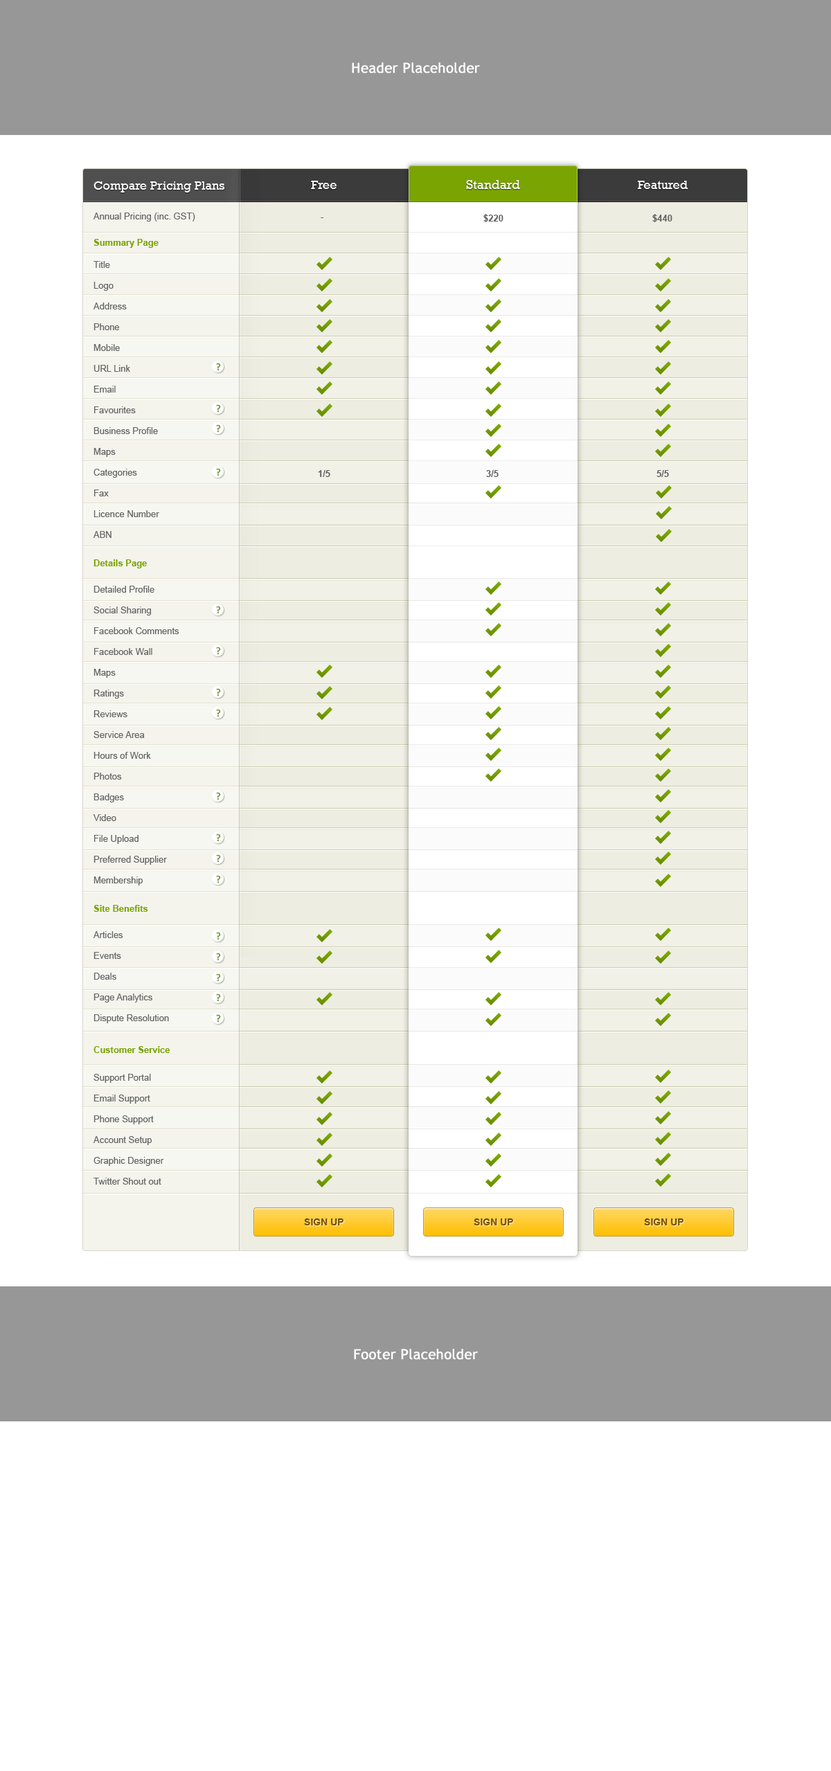
<style>
.page{position:relative;width:831px;height:1771px;background:#ffffff}
.page>*{position:absolute;margin:0}
.t1{font:13.8px "TrebuchetMS";color:#ffffff;font-weight:bold}
.t2{font:12.5px "Rockwell";color:#ffffff}
.t3{font:13.2px "Rockwell";color:#ffffff}
.t4{font:9px "ArialMT";color:#666666}
.t5{font:9px "Arial-BoldMT";color:#666666}
.t6{font:9px "Arial-BoldMT";color:#7aa402}
.t7{font:9px/20.8px "ArialMT";color:#666666}
.t8{font:10.5px "Calibri-Bold";color:#769c3a}
.t9{font:9.7px "Arial-BoldMT";color:#7e5400;text-transform:uppercase}
</style>
<div class="page">
<p class="t1" style="left:352px;top:62px;width:128px;height:11px">Header Placeholder</p>
<p class="t2" style="left:93px;top:181px;width:132px;height:11px">Compare Pricing Plans</p>
<p class="t2" style="left:311px;top:181px;width:25px;height:8px">Free</p>
<p class="t3" style="left:466px;top:180px;width:54px;height:9px">Standard</p>
<p class="t2" style="left:637px;top:181px;width:51px;height:8px">Featured</p>
<p class="t4" style="left:93px;top:213px;width:102px;height:9px">Annual Pricing (inc. GST)</p>
<p class="t4" style="left:321px;top:217px;width:2px;height:1px">-</p>
<p class="t5" style="left:483px;top:214px;width:20px;height:8px">$220</p>
<p class="t5" style="left:652px;top:214px;width:20px;height:8px">$440</p>
<p class="t6" style="left:93px;top:239px;width:66px;height:9px">Summary Page</p>
<p class="t7" style="left:93px;top:261px;width:66px;height:277px">Title<br>Logo<br>Address<br>Phone<br>Mobile<br>URL Link<br>Email<br>Favourites<br>Business Profile<br>Maps<br>Categories<br>Fax<br>Licence Number<br>ABN</p>
<p class="t8" style="left:216px;top:363px;width:5px;height:8px">?</p>
<p class="t5" style="left:318px;top:470px;width:12px;height:7px">1/5</p>
<p class="t5" style="left:486px;top:470px;width:12px;height:7px">3/5</p>
<p class="t5" style="left:656px;top:470px;width:13px;height:7px">5/5</p>
<p class="t6" style="left:93px;top:559px;width:54px;height:9px">Details Page</p>
<p class="t7" style="left:93px;top:586px;width:86px;height:299px">Detailed Profile <br>Social Sharing <br>Facebook Comments <br>Facebook Wall <br>Maps <br>Ratings <br>Reviews <br>Service Area <br>Hours of Work <br>Photos <br>Badges <br>Video <br>File Upload <br>Preferred Supplier <br>Membership</p>
<p class="t6" style="left:93px;top:905px;width:55px;height:7px">Site Benefits</p>
<p class="t7" style="left:93px;top:931px;width:76px;height:92px">Articles <br>Events <br>Deals <br>Page Analytics <br>Dispute Resolution</p>
<p class="t8" style="left:216px;top:1014px;width:5px;height:9px">?</p>
<p class="t6" style="left:93px;top:1046px;width:77px;height:7px">Customer Service</p>
<p class="t7" style="left:93px;top:1074px;width:71px;height:111px">Support Portal <br>Email Support <br>Phone Support <br>Account Setup <br>Graphic Designer <br>Twitter Shout out</p>
<p class="t9" style="left:304px;top:1218px;width:39px;height:7px">sign up</p>
<p class="t9" style="left:474px;top:1218px;width:39px;height:7px">sign up</p>
<p class="t9" style="left:644px;top:1218px;width:39px;height:7px">sign up</p>
<p class="t1" style="left:354px;top:1349px;width:124px;height:11px">Footer Placeholder</p>
</div>
